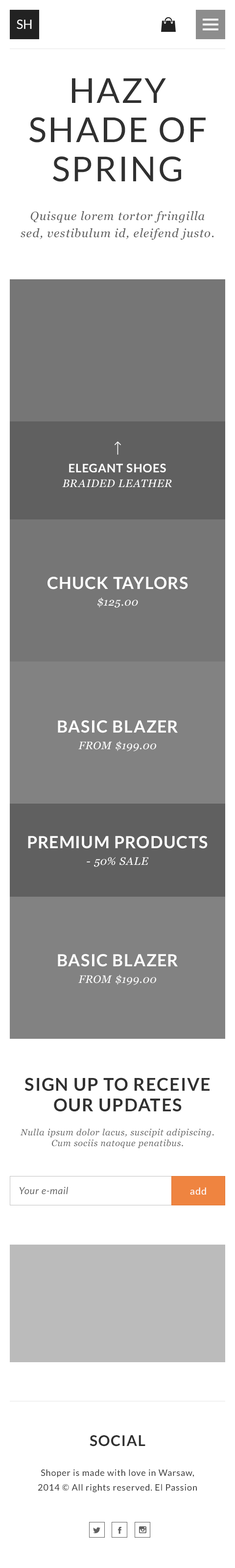
<style>
.page{position:relative;width:235px;height:1568px;background:#ffffff}
.page>*{position:absolute;margin:0}
.t1{font:12.7px "Lato-Regular";color:#ffffff;text-transform:uppercase}
.t2{font:34.3px/39.2px "Lato-Regular";letter-spacing:0.05em;color:#303030;text-transform:uppercase}
.t3{font:11.8px/17.1px "Georgia-Italic";letter-spacing:0.05em;color:#606060}
.t4{font:10.8px/14.7px "Georgia-Italic";letter-spacing:0.05em;color:#ffffff;text-transform:uppercase}
.t5{font:11.8px/13.2px "Lato-Bold";letter-spacing:0.05em;color:#ffffff;text-transform:uppercase}
.t6{font:16.7px/13.2px "Lato-Bold";letter-spacing:0.05em;color:#ffffff;text-transform:uppercase}
.t7{font:10.8px/16.7px "Georgia-Italic";letter-spacing:0.05em;color:#ffffff;text-transform:uppercase}
.t8{font:17.6px/20.6px "Lato-Bold";letter-spacing:0.05em;color:#303030;text-transform:uppercase}
.t9{font:8.8px/10.8px "Georgia-Italic";letter-spacing:0.05em;color:#606060}
.t10{font:9.8px "Lato-Italic";letter-spacing:0.05em;color:#606060}
.t11{font:9.8px "Lato-Regular";letter-spacing:0.05em;color:#ffffff}
.t12{font:14.7px "Lato-Bold";letter-spacing:0.05em;color:#303030;text-transform:uppercase}
.t13{font:8.8px/14.7px "Lato-Regular";letter-spacing:0.05em;color:#303030}
</style>
<div class="page">
<p class="t1" style="left:17px;top:20px;width:15px;height:9px">SH</p>
<p class="t2" style="left:29px;top:78px;width:177px;height:104px;text-align:center">Hazy Shade of spring</p>
<p class="t3" style="left:21px;top:211px;width:193px;height:29px;text-align:center">Quisque lorem tortor fringilla<br>sed, vestibulum id, eleifend justo.</p>
<p class="t4" style="left:62px;top:464px;width:110px;height:23px;text-align:center"><span class="t5">elegant shoes<br></span>BRAIDED LEATHER</p>
<p class="t6" style="left:48px;top:577px;width:140px;height:31px;text-align:center">chuck taylors<br><span class="t7">$125.00</span></p>
<p class="t6" style="left:58px;top:720px;width:120px;height:31px;text-align:center">basic blazer<br><span class="t7">from $199.00</span></p>
<p class="t6" style="left:28px;top:836px;width:180px;height:31px;text-align:center">Premium products<br><span class="t7">- 50% sale</span></p>
<p class="t6" style="left:58px;top:954px;width:120px;height:31px;text-align:center">basic blazer<br><span class="t7">from $199.00</span></p>
<p class="t8" style="left:24px;top:1078px;width:186px;height:34px;text-align:center">sign up to receive our updates</p>
<p class="t9" style="left:20px;top:1128px;width:194px;height:20px;text-align:center">Nulla ipsum dolor lacus, suscipit adipiscing. Cum sociis natoque penatibus.</p>
<p class="t10" style="left:19px;top:1187px;width:49px;height:7px">Your e-mail</p>
<p class="t11" style="left:190px;top:1187px;width:16px;height:8px">add</p>
<p class="t12" style="left:90px;top:1435px;width:56px;height:11px">social</p>
<p class="t13" style="left:38px;top:1469px;width:159px;height:24px;text-align:center">Shoper is made with love in Warsaw,<br>2014 © All rights reserved. El Passion</p>
</div>
